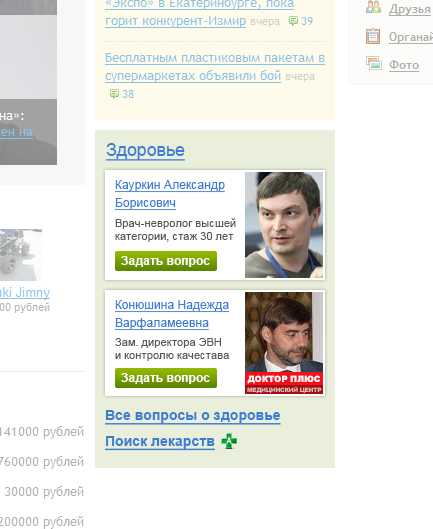
<style>
.page{position:relative;width:433px;height:529px;background:#ffffff}
.page>*{position:absolute;margin:0}
.t1{font:18px "ArialMT";letter-spacing:-0.01em;color:#3a7dd3;text-decoration:underline}
.t2{font:12px/18px "ArialMT";color:#3a7dd3;text-decoration:underline}
.t3{font:11px "ArialMT";color:#575757}
.t4{font:12px "Arial-BoldMT";color:#ffffff}
.t5{font:8.5px "Arial-Black";color:#ffffff;text-transform:uppercase}
.t6{font:6px "Arial-Black";letter-spacing:-0.05em;color:#deb9ba;text-transform:uppercase}
.t7{font:14px "Arial-BoldMT";color:#3a7dd3;text-decoration:underline}
</style>
<div class="page">
<p class="t1" style="left:106px;top:143px;width:79px;height:18px">Здоровье</p>
<p class="t2" style="left:115px;top:180px;width:110px;height:31px">Кауркин Александр Борисович</p>
<p class="t3" style="left:115px;top:218px;width:121px;height:24px">Врач-невролог высшей категории, стаж 30 лет</p>
<p class="t4" style="left:121px;top:256px;width:89px;height:11px">Задать вопрос</p>
<p class="t2" style="left:115px;top:300px;width:115px;height:31px">Конюшина Надежда Варфаламеевна</p>
<p class="t3" style="left:115px;top:338px;width:114px;height:23px">Зам. директора ЭВН <br>и контролю качестава</p>
<p class="t4" style="left:121px;top:373px;width:89px;height:11px">Задать вопрос</p>
<p class="t5" style="left:247px;top:375px;width:73px;height:9px">доктор плюс</p>
<p class="t6" style="left:247px;top:386px;width:75px;height:7px">медицинский центр</p>
<p class="t7" style="left:105px;top:410px;width:176px;height:15px">Все вопросы о здоровье</p>
<p class="t7" style="left:105px;top:436px;width:110px;height:15px">Поиск лекарств</p>
</div>
